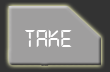
<style>
.page{position:relative;width:110px;height:72px;background:#9f9e9e}
.page>*{position:absolute;margin:0}
.t1{font:26px "DS-Digital";letter-spacing:-0.025em;color:#ffffff}
</style>
<div class="page">
<p class="t1" style="left:25px;top:29px;width:47px;height:19px">take</p>
</div>
